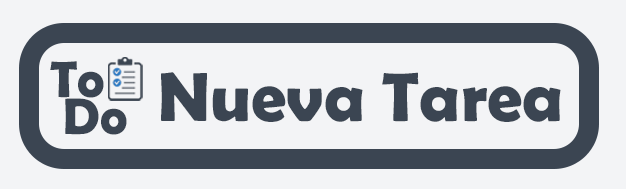
<style>
.page{position:relative;width:626px;height:189px;background:#f3f4f6}
.page>*{position:absolute;margin:0}
.t1{font:51.8px/36.6px "BerlinSansFBDemi-Bold";color:#3b4552}
.t2{font:70px "BerlinSansFBDemi-Bold";color:#3b4552}
</style>
<div class="page">
<p class="t1" style="left:50px;top:61px;width:77px;height:74px">To<br> Do</p>
<p class="t2" style="left:161px;top:72px;width:400px;height:50px">Nueva Tarea</p>
</div>
